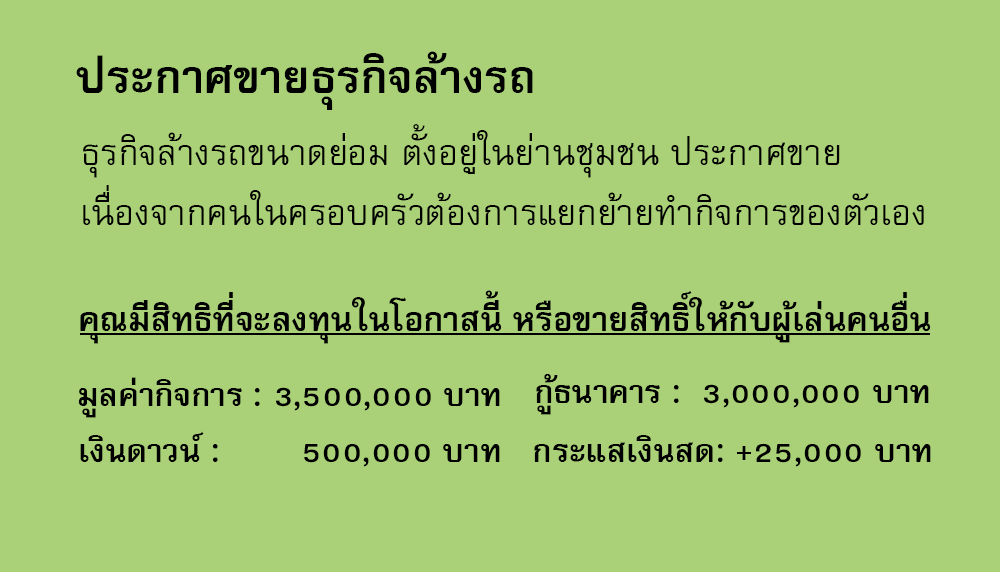
<style>
.page{position:relative;width:1000px;height:572px;background:#aad178}
.page>*{position:absolute;margin:0}
.t1{font:64px "FreesiaUPCBold";color:#000000}
.t2{font:50px/60px "FreesiaUPC";color:#000000}
.t3{font:47px "FreesiaUPCBold";color:#000000}
.t4{font:45px "FreesiaUPCBold";color:#000000}
</style>
<div class="page">
<p class="t1" style="left:76px;top:51px;width:457px;height:59px">ประกาศขายธุรกิจล้างรถ</p>
<p class="t2" style="left:83px;top:124px;width:841px;height:101px">ธุรกิจล้างรถขนาดย่อม ตั้งอยู่ในย่านชุมชน ประกาศขาย<br>เนื่องจากคนในครอบครัวต้องการแยกย้ายทำกิจการของตัวเอง</p>
<p class="t3" style="left:80px;top:290px;width:851px;height:54px">คุณมีสิทธิที่จะลงทุนในโอกาสนี้ หรือขายสิทธิ์ให้กับผู้เล่นคนอื่น</p>
<p class="t4" style="left:78px;top:377px;width:422px;height:41px">มูลค่ากิจการ : 3,500,000 บาท</p>
<p class="t4" style="left:536px;top:374px;width:393px;height:41px">กู้ธนาคาร :  3,000,000 บาท</p>
<p class="t4" style="left:80px;top:431px;width:420px;height:36px">เงินดาวน์ :        500,000 บาท</p>
<p class="t4" style="left:534px;top:435px;width:397px;height:32px">กระแสเงินสด: +25,000 บาท</p>
</div>
